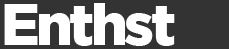
<style>
.page{position:relative;width:229px;height:49px;background:#333333}
.page>*{position:absolute;margin:0}
.t1{font:58px "GothamBlack";letter-spacing:-0.06em;color:#ffffff}
</style>
<div class="page">
<p class="t1" style="left:4px;top:3px;width:171px;height:43px">Enthst</p>
</div>
